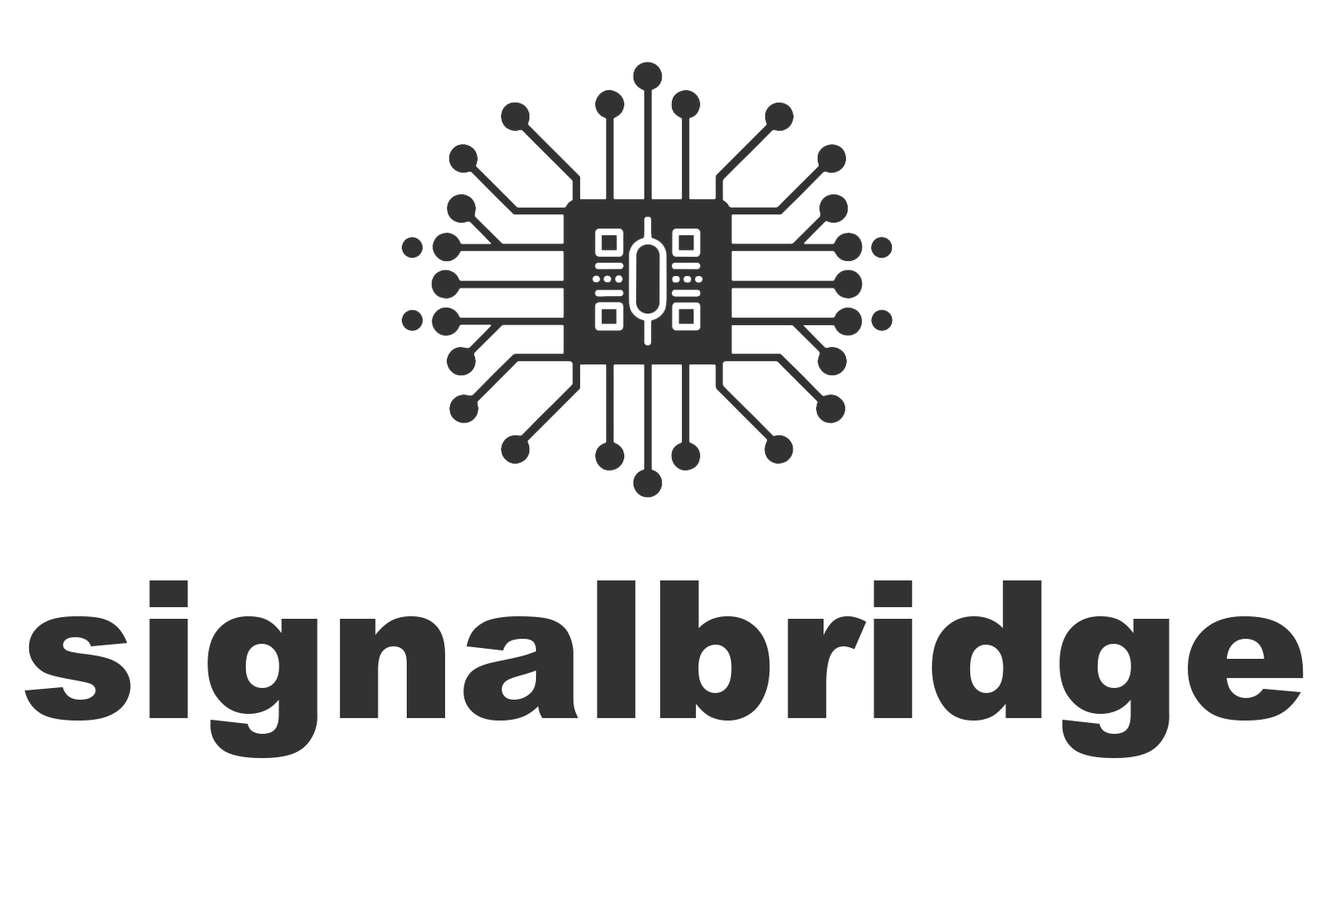
<style>
.page{position:relative;width:1327px;height:899px;background:#ffffff}
.page>*{position:absolute;margin:0}
.t1{font:191.7px "Arial-Black";color:#323232}
</style>
<div class="page">
<p class="t1" style="left:24px;top:580px;width:1280px;height:178px">signalbridge</p>
</div>
